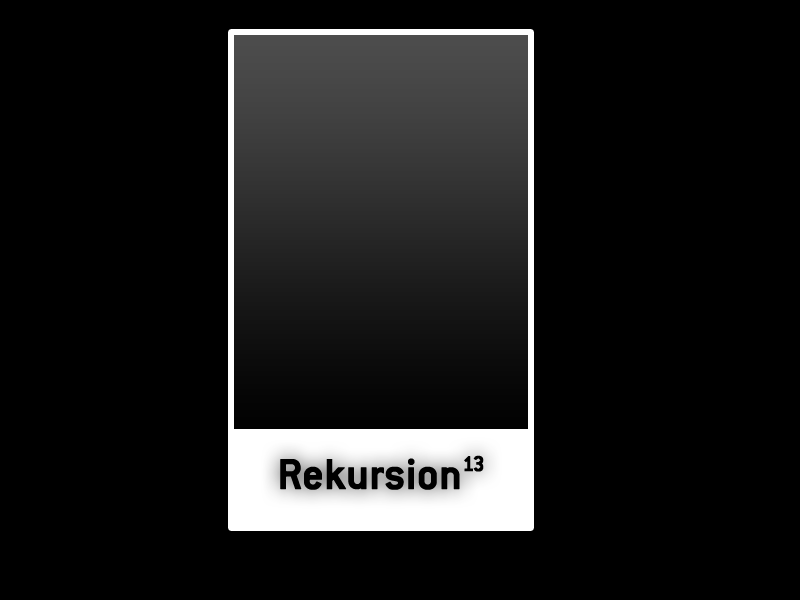
<style>
.page{position:relative;width:800px;height:600px;background:#000000}
.page>*{position:absolute;margin:0}
.t1{font:48px "ConduitITC-Bold";color:#000000}
.t2{font:24px "ConduitITC-Bold";letter-spacing:0.002em;color:#000000}
</style>
<div class="page">
<p class="t1" style="left:280px;top:455px;width:204px;height:35px">Rekursion<span class="t2">13</span></p>
</div>
